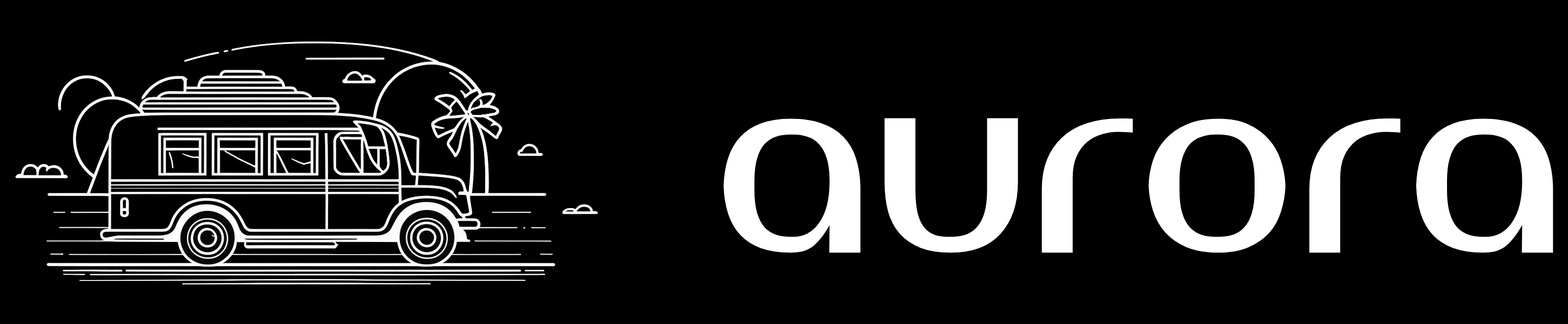
<style>
.page{position:relative;width:1568px;height:324px;background:#000000}
.page>*{position:absolute;margin:0}
.t1{font:268.3px "AmerikaSans";letter-spacing:0.004em;color:#ffffff}
</style>
<div class="page">
<p class="t1" style="left:723px;top:118px;width:830px;height:135px">aurora</p>
</div>
